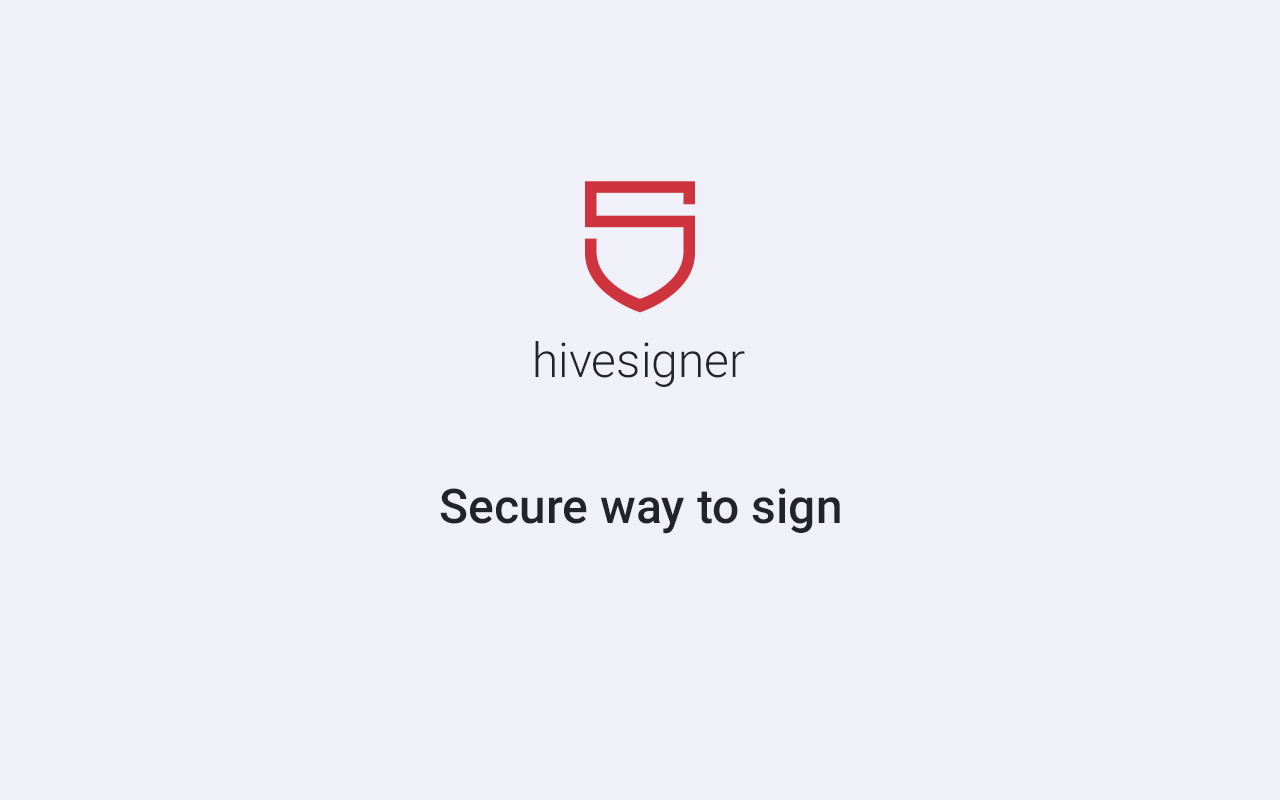
<style>
.page{position:relative;width:1280px;height:800px;background:#f0f0f8}
.page>*{position:absolute;margin:0}
.t1{font:48px "Roboto-Light";color:#212529}
.t2{font:48px "Roboto-Medium";color:#212529}
</style>
<div class="page">
<p class="t1" style="left:535px;top:341px;width:210px;height:46px">hivesigner</p>
<p class="t2" style="left:440px;top:488px;width:400px;height:46px">Secure way to sign</p>
</div>
